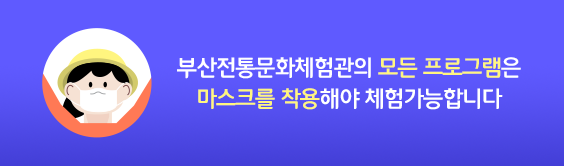
<style>
.page{position:relative;width:564px;height:166px;background:#5f5aff}
.page>*{position:absolute;margin:0}
.t1{font:23px/31px "12LotteMartDreamBold";letter-spacing:-0.05em;color:#ffffff}
.t2{font:23px/31px "12LotteMartDreamBold";letter-spacing:-0.05em;color:#fff57f}
</style>
<div class="page">
<p class="t1" style="left:177px;top:57px;width:344px;height:53px;text-align:center">부산전통문화체험관의 <span class="t2">모든 프로그램</span>은<br><span class="t2">마스크를 착용</span>해야 체험가능합니다</p>
</div>
